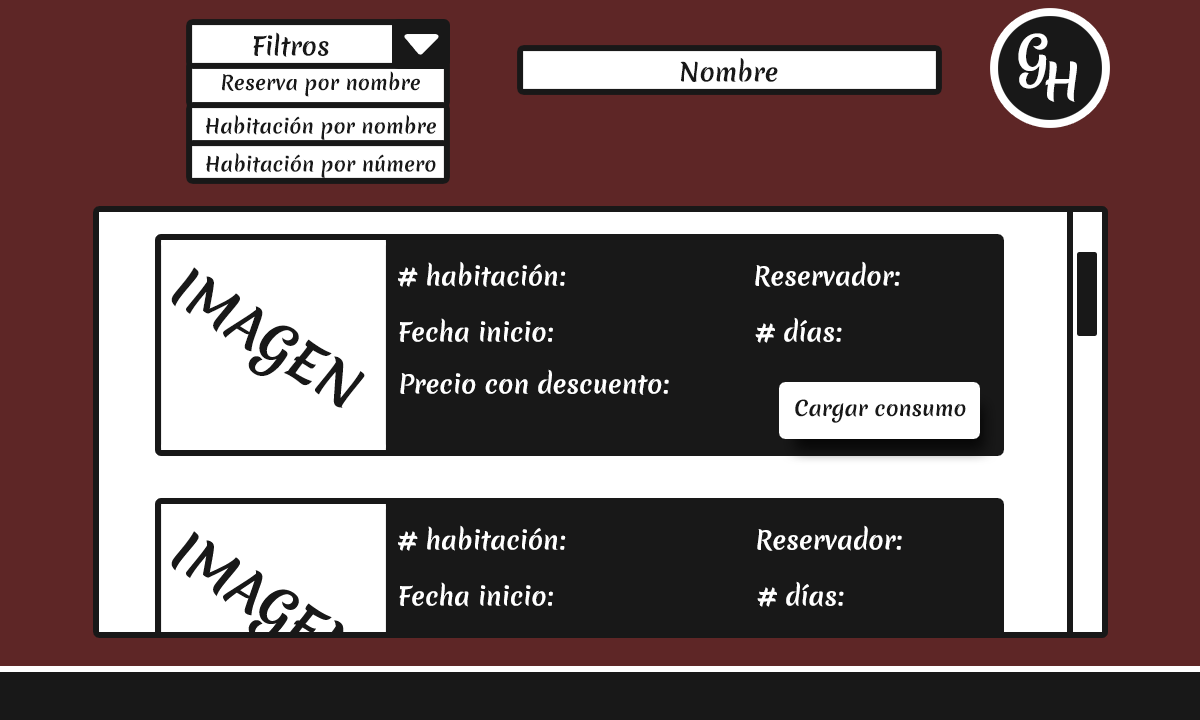
<style>
.page{position:relative;width:1200px;height:720px;background:#181818}
.page>*{position:absolute;margin:0}
.t1{font:24.6px "MeriendaOne-Regular";color:#181818}
.t2{font:48.4px "MeriendaOne-Regular";color:#ffffff}
.t3{font:19.6px "MeriendaOne-Regular";color:#181818}
.t4{font:51.9px "MeriendaOne-Regular";color:#181818}
.t5{font:24.6px "MeriendaOne-Regular";color:#ffffff}
.t6{font:20.6px "MeriendaOne-Regular";color:#181818}
</style>
<div class="page">
<p class="t1" style="left:253px;top:32px;width:76px;height:25px">Filtros</p>
<p class="t2" style="left:1018px;top:33px;width:30px;height:56px">G</p>
<p class="t1" style="left:680px;top:57px;width:98px;height:25px">Nombre</p>
<p class="t2" style="left:1045px;top:61px;width:32px;height:41px">H</p>
<p class="t3" style="left:222px;top:71px;width:198px;height:26px">Reserva por nombre</p>
<p class="t3" style="left:206px;top:114px;width:230px;height:26px">Habitación por nombre</p>
<p class="t3" style="left:206px;top:152px;width:230px;height:26px">Habitación por número</p>
<p class="t4" style="left:171px;top:267px;width:194px;height:141px;rotate:32deg">IMAGEN</p>
<p class="t5" style="left:398px;top:261px;width:168px;height:26px"># habitación:</p>
<p class="t5" style="left:755px;top:261px;width:145px;height:26px">Reservador:</p>
<p class="t5" style="left:399px;top:318px;width:154px;height:25px">Fecha inicio:</p>
<p class="t5" style="left:755px;top:317px;width:87px;height:26px"># días:</p>
<p class="t5" style="left:400px;top:369px;width:269px;height:26px">Precio con descuento:</p>
<p class="t6" style="left:795px;top:399px;width:171px;height:24px">Cargar consumo</p>
<p class="t5" style="left:398px;top:525px;width:168px;height:26px"># habitación:</p>
<p class="t5" style="left:757px;top:525px;width:145px;height:26px">Reservador:</p>
<p class="t5" style="left:399px;top:582px;width:154px;height:25px">Fecha inicio:</p>
<p class="t5" style="left:757px;top:581px;width:87px;height:26px"># días:</p>
</div>
